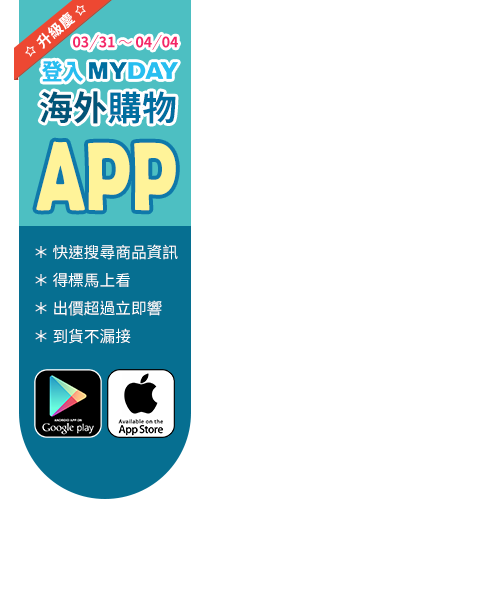
<style>
.page{position:relative;width:485px;height:599px;background:#ffffff}
.page>*{position:absolute;margin:0}
.t1{font:14.3px "NotoSansHant-Bold";letter-spacing:0.05em;color:#ffffff}
.t2{font:14.3px "NotoSansHant-Bold";color:#f42867}
.t3{font:14.3px "NotoSansHant-Light";color:#f42867}
.t4{font:13.5px "NotoSansHant-Bold"}
.t5{font:22.5px "NotoSansHant-Black";color:#28bef0;scale:0.93 1}
.t6{font:34.3px "NotoSansHant-Bold";color:#015578}
.t7{font:34.3px "NotoSansHant-Bold";color:#006ea0}
.t8{font:97.9px "BerlinSansFBDemi-Bold";color:#fff399;scale:0.72 1}
.t9{font:15.7px/28px "NotoSansHant-Regular";color:#ffffff}
</style>
<div class="page">
<p class="t1" style="left:36px;top:12px;width:40px;height:37px;rotate:-41deg">升級慶</p>
<p class="t2" style="left:73px;top:36px;width:105px;height:12px">03   31 <span class="t3">～ </span>04   04</p>
<p class="t4" style="left:89px;top:34px;width:10px;height:16px;rotate:-15deg">／</p>
<p class="t4" style="left:152px;top:34px;width:10px;height:16px;rotate:-15deg">／</p>
<p class="t5" style="left:41px;top:60px;width:42px;height:22px">登入</p>
<p class="t6" style="left:40px;top:91px;width:136px;height:33px">海外<span class="t7">購物</span></p>
<p class="t8" style="left:36px;top:141px;width:140px;height:70px">APP</p>
<p class="t9" style="left:35px;top:244px;width:143px;height:100px">＊ 快速搜尋商品資訊<br>＊ 得標馬上看<br>＊ 出價超過立即響<br>＊ 到貨不漏接</p>
</div>
